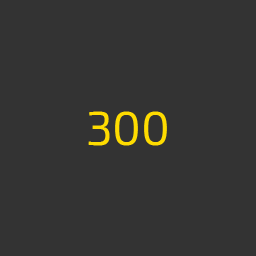
<style>
.page{position:relative;width:256px;height:256px;background:#333333}
.page>*{position:absolute;margin:0}
.t1{font:48px "Exo2-Regular";color:#ffdc00}
</style>
<div class="page">
<p class="t1" style="left:88px;top:111px;width:79px;height:35px">300</p>
</div>
